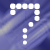
<style>
.page{position:relative;width:50px;height:50px}
.page>*{position:absolute;margin:0}
.t1{font:48px "AtomicClockRadio";color:#ffffff}
</style>
<div class="page">
<p class="t1" style="left:10px;top:3px;width:30px;height:42px">7</p>
</div>
